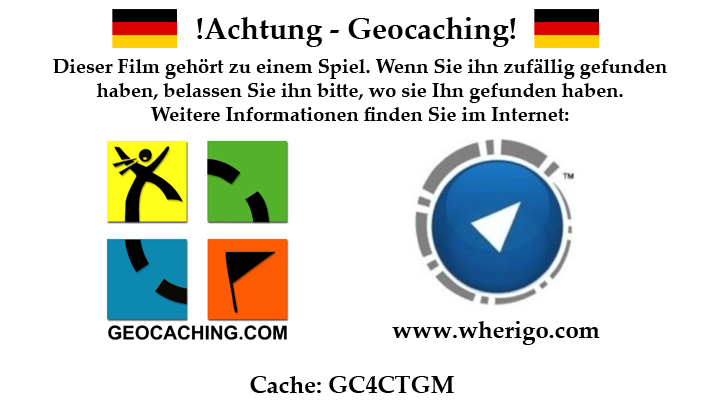
<style>
.page{position:relative;width:720px;height:405px;background:#ffffff}
.page>*{position:absolute;margin:0}
.t1{font:30px "PalatinoLinotype-Bold";color:#000000}
.t2{font:20px "PalatinoLinotype-Bold";color:#000000}
.t3{font:24px "PalatinoLinotype-Bold";color:#000000}
</style>
<div class="page">
<p class="t1" style="left:197px;top:17px;width:319px;height:30px">!Achtung - Geocaching!</p>
<p class="t2" style="left:53px;top:59px;width:614px;height:62px;text-align:center">Dieser Film gehört zu einem Spiel. Wenn Sie ihn zufällig gefunden haben, belassen Sie ihn bitte, wo sie Ihn gefunden haben. <br>Weitere Informationen finden Sie im Internet:</p>
<p class="t3" style="left:392px;top:321px;width:208px;height:24px">www.wherigo.com</p>
<p class="t3" style="left:250px;top:376px;width:204px;height:17px">Cache: GC4CTGM</p>
</div>
